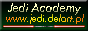
<style>
.page{position:relative;width:88px;height:31px}
.page>*{position:absolute;margin:0}
.t1{font:12px "FuturaBT-BookItalic"}
.t2{font:10px "FuturaBT-BookItalic"}
</style>
<div class="page">
<p class="t1" style="left:8px;top:3px;width:73px;height:12px">Jedi Academy</p>
<p class="t2" style="left:6px;top:14px;width:78px;height:10px">www.jedi.delart.pl</p>
</div>
